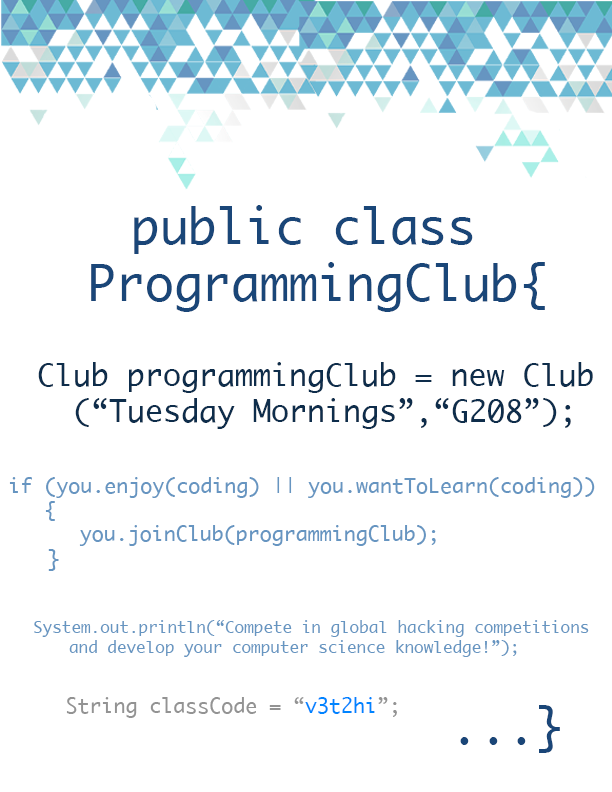
<style>
.page{position:relative;width:612px;height:792px;background:#ffffff}
.page>*{position:absolute;margin:0}
.t1{font:48px "Ayuthaya";color:#1a4678}
.t2{font:60px "Ayuthaya";color:#ffffff}
.t3{font:30px "Ayuthaya";color:#0e2d4b}
.t4{font:20px "Ayuthaya";color:#6695c1}
.t5{font:22px "Ayuthaya";color:#6695c1}
.t6{font:16px "Ayuthaya";color:#6695c1}
.t7{font:20px "Ayuthaya";color:#939393}
.t8{font:20px "Ayuthaya";color:#0084ff}
</style>
<div class="page">
<p class="t1" style="left:91px;top:205px;width:454px;height:107px;text-align:center"><span class="t2"><br></span>public class <br>ProgrammingClub{</p>
<p class="t3" style="left:38px;top:362px;width:555px;height:67px">Club programmingClub = new Club<br> (“Tuesday Mornings”,“G208”);</p>
<p class="t4" style="left:9px;top:477px;width:586px;height:94px">if (you.enjoy(coding) || you.wantToLearn(coding))<br>   {<br>      you.joinClub(programmingClub);<br><span class="t5">   }</span></p>
<p class="t6" style="left:34px;top:620px;width:555px;height:37px">System.out.println(“Compete in global hacking competitions<br> and develop your computer science knowledge!”);</p>
<p class="t7" style="left:66px;top:697px;width:331px;height:21px">String classCode = “<span class="t8">v3t2hi</span>”;</p>
<p class="t1" style="left:460px;top:705px;width:100px;height:48px">...}</p>
</div>
